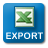
<style>
.page{position:relative;width:48px;height:48px;background:#ffffff}
.page>*{position:absolute;margin:0}
.t1{font:9px "ArialRoundedMTBold";letter-spacing:0.02em;color:#ffffff}
</style>
<div class="page">
<p class="t1" style="left:6px;top:32px;width:37px;height:7px">EXPORT</p>
</div>
